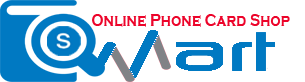
<style>
.page{position:relative;width:305px;height:82px;background:#ffffff}
.page>*{position:absolute;margin:0}
.t1{font:17.9px "CopperplateGothic-Bold";color:#ec042a;scale:0.79 1}
</style>
<div class="page">
<p class="t1" style="left:92px;top:14px;width:198px;height:13px">Online Phone Card Shop</p>
</div>
